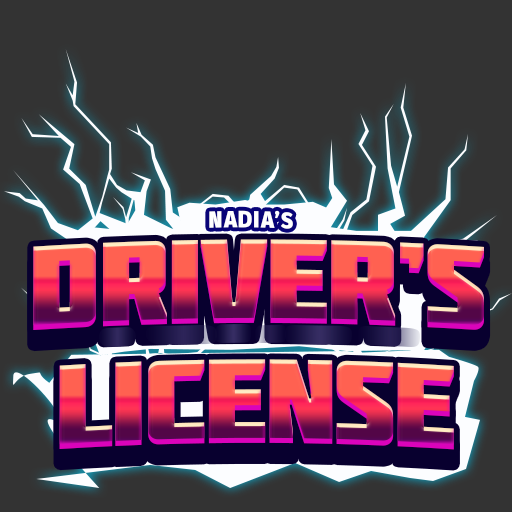
<style>
.page{position:relative;width:512px;height:512px;background:#333333}
.page>*{position:absolute;margin:0}
.t1{font:22.7px "FiraSans-Heavy";letter-spacing:0.05em;color:#ffffff;scale:0.96 1}
.t2{font:119px "Molot";letter-spacing:-0.025em}
</style>
<div class="page">
<p class="t1" style="left:209px;top:210px;width:84px;height:19px">NADIA’S</p>
<p class="t2" style="left:33px;top:239px;width:451px;height:91px">Driver’s</p>
<p class="t2" style="left:59px;top:359px;width:395px;height:91px">License</p>
</div>
